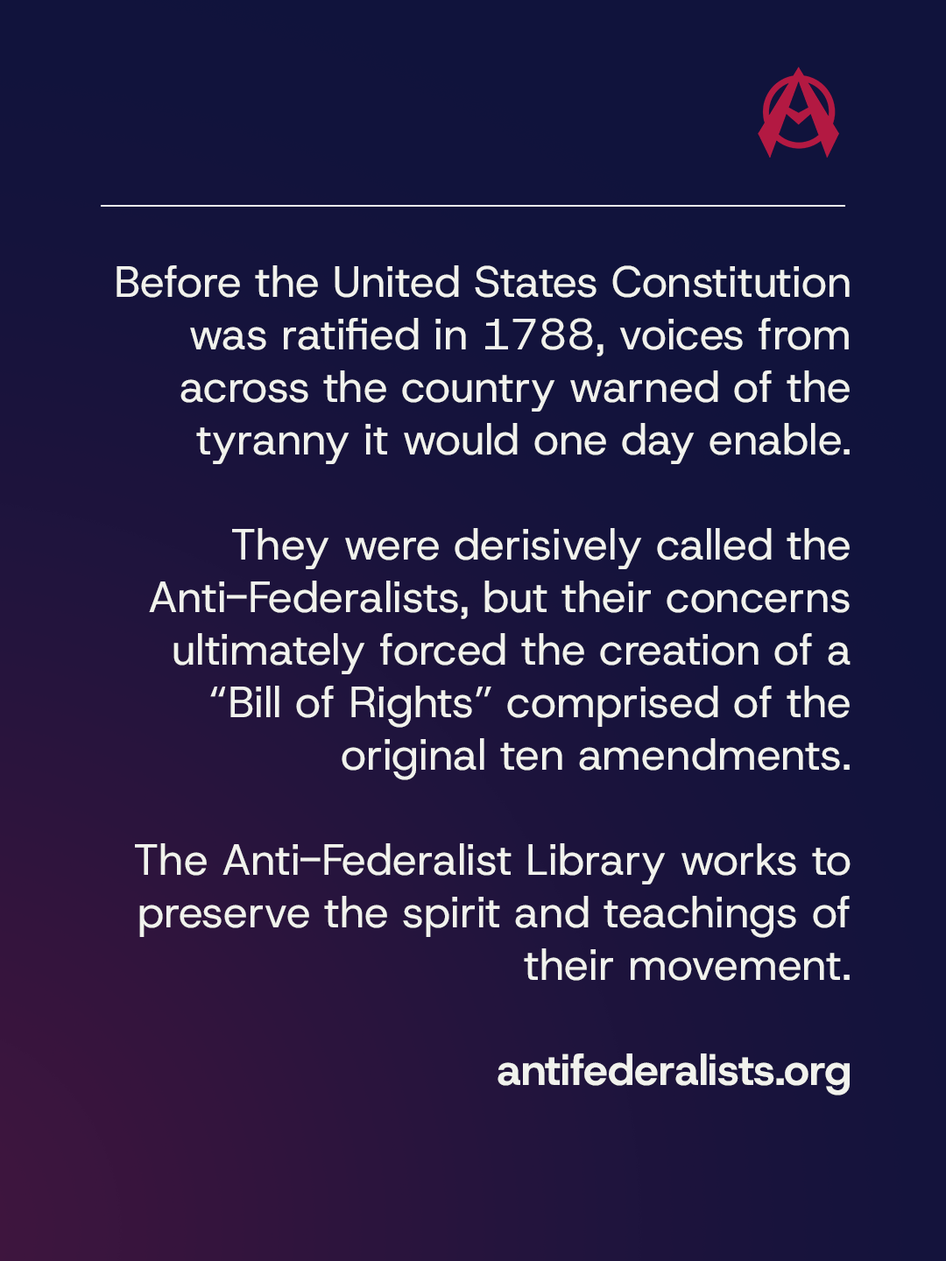
<style>
.page{position:relative;width:946px;height:1261px}
.page>*{position:absolute;margin:0}
.t1{font:43.8px "HostGrotesk-Regular";color:#f1f2ed}
.t2{font:43.8px "HostGrotesk-Bold";color:#f1f2ed}
</style>
<div class="page">
<p class="t1" style="left:116px;top:265px;width:734px;height:830px;text-align:right">Before the United States Constitution was ratified in 1788, voices from across the country warned of the tyranny it would one day enable. <br><br>They were derisively called the <br>Anti-Federalists, but their concerns <br>ultimately forced the creation of a “Bill of Rights” comprised of the <br>original ten amendments.<br><br>The Anti-Federalist Library works to preserve the spirit and teachings of their movement.<br><br><span class="t2">antifederalists.org</span></p>
</div>
